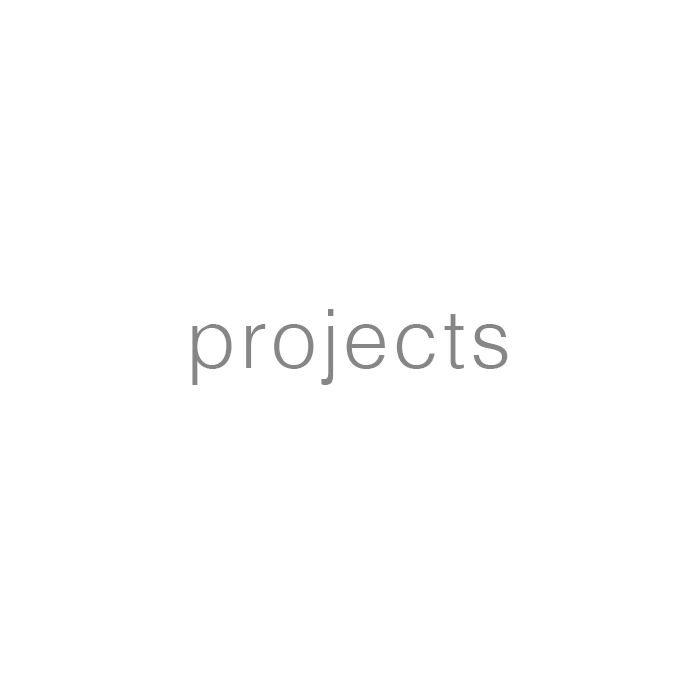
<style>
.page{position:relative;width:700px;height:700px;background:#ffffff}
.page>*{position:absolute;margin:0}
.t1{font:82px "Helvetica-Light";letter-spacing:0.05em;color:#868686}
</style>
<div class="page">
<p class="t1" style="left:192px;top:309px;width:316px;height:76px">projects</p>
</div>
